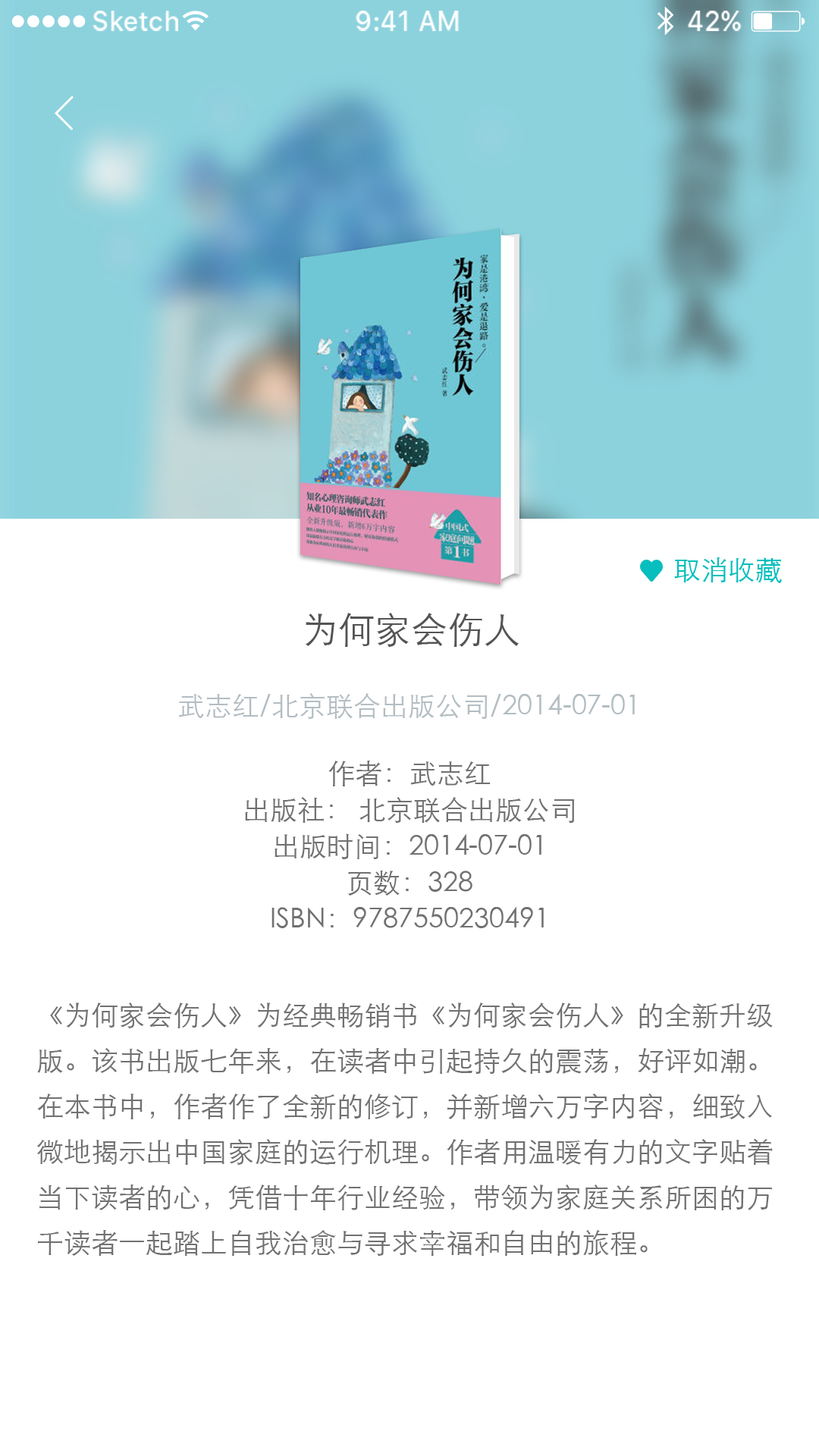
<style>
.page{position:relative;width:819px;height:1456px;background:#ffffff}
.page>*{position:absolute;margin:0}
.t1{font:26.2px "SFUIText-Medium";color:#ffffff}
.t2{font:27.3px "STHeitiSC-Light";color:#06bebd}
.t3{font:36.4px "STHeitiSC-Light";color:#545454}
.t4{font:27.3px "STHeitiSC-Light";color:#b3bdc2}
.t5{font:27.3px/36.4px "STHeitiSC-Light";color:#717171}
.t6{font:27.3px/45.5px "STHeitiSC-Light";color:#717171}
</style>
<div class="page">
<p class="t1" style="left:93px;top:11px;width:85px;height:20px">Sketch</p>
<p class="t1" style="left:356px;top:11px;width:103px;height:20px">9:41 AM</p>
<p class="t1" style="left:688px;top:11px;width:54px;height:20px">42%</p>
<p class="t2" style="left:674px;top:557px;width:108px;height:26px">取消收藏</p>
<p class="t3" style="left:305px;top:613px;width:214px;height:34px">为何家会伤人</p>
<p class="t4" style="left:178px;top:693px;width:457px;height:26px">武志红/北京联合出版公司/2014-07-01</p>
<p class="t5" style="left:245px;top:761px;width:330px;height:167px;text-align:center">作者：武志红<br>出版社： 北京联合出版公司<br>出版时间：2014-07-01<br>页数：328<br>ISBN：9787550230491</p>
<p class="t6" style="left:37px;top:1003px;width:736px;height:253px">《为何家会伤人》为经典畅销书《为何家会伤人》的全新升级版。该书出版七年来，在读者中引起持久的震荡，好评如潮。在本书中，作者作了全新的修订，并新增六万字内容，细致入微地揭示出中国家庭的运行机理。作者用温暖有力的文字贴着当下读者的心，凭借十年行业经验，带领为家庭关系所困的万千读者一起踏上自我治愈与寻求幸福和自由的旅程。</p>
</div>
